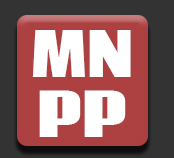
<style>
.page{position:relative;width:174px;height:158px;background:#333333}
.page>*{position:absolute;margin:0}
.t1{font:60px/60px "Coda-Heavy";color:#ffffff}
</style>
<div class="page">
<p class="t1" style="left:32px;top:30px;width:99px;height:107px;text-align:center">MN<br>PP</p>
</div>
